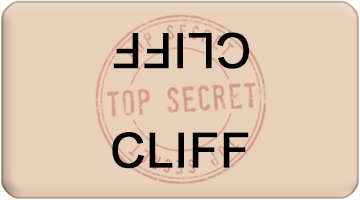
<style>
.page{position:relative;width:360px;height:200px;background:#e8d0bb}
.page>*{position:absolute;margin:0}
.t1{font:48px "ArialMT";color:#000000;font-weight:bold}
</style>
<div class="page">
<p class="t1" style="left:113px;top:32px;width:136px;height:37px;rotate:180deg">CLIFF</p>
<p class="t1" style="left:112px;top:132px;width:137px;height:37px">CLIFF</p>
</div>
